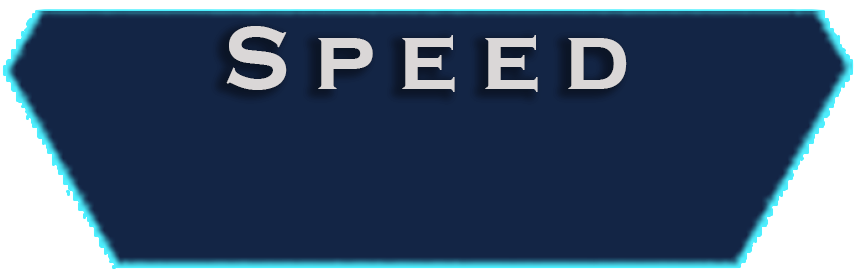
<style>
.page{position:relative;width:858px;height:280px;background:#132545}
.page>*{position:absolute;margin:0}
.t1{font:93.2px "CopperplateGothic-Bold";color:#dad7d7}
</style>
<div class="page">
<p class="t1" style="left:226px;top:26px;width:401px;height:66px">S p e e d</p>
</div>
